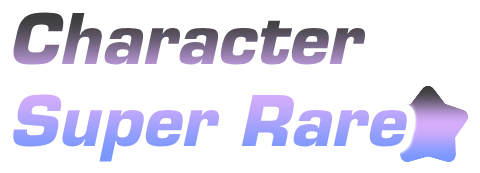
<style>
.page{position:relative;width:480px;height:173px;background:#ffffff}
.page>*{position:absolute;margin:0}
.t1{font:68px "Eurostile-BoldOblique"}
</style>
<div class="page">
<p class="t1" style="left:13px;top:12px;width:394px;height:150px">Character<br>Super Rare</p>
</div>
